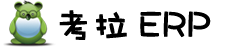
<style>
.page{position:relative;width:230px;height:48px;background:#ffffff}
.page>*{position:absolute;margin:0}
.t1{font:36px "DFWaWaSC-W5";color:#000000;font-weight:bold}
</style>
<div class="page">
<p class="t1" style="left:59px;top:10px;width:152px;height:30px">考拉ERP</p>
</div>
